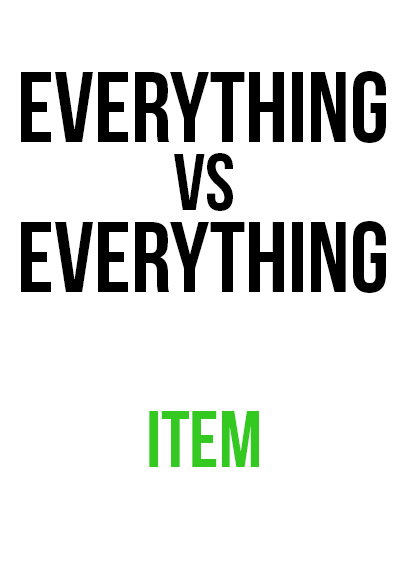
<style>
.page{position:relative;width:408px;height:585px;background:#ffffff}
.page>*{position:absolute;margin:0}
.t1{font:100px "BebasNeue";color:#000000}
.t2{font:80px "BebasNeue";color:#000000}
.t3{font:80px "BebasNeue";color:#33c920}
</style>
<div class="page">
<p class="t1" style="left:21px;top:71px;width:365px;height:72px">everything</p>
<p class="t2" style="left:174px;top:153px;width:59px;height:58px">vs</p>
<p class="t1" style="left:21px;top:221px;width:365px;height:72px">everything</p>
<p class="t3" style="left:149px;top:411px;width:110px;height:56px">item</p>
</div>
